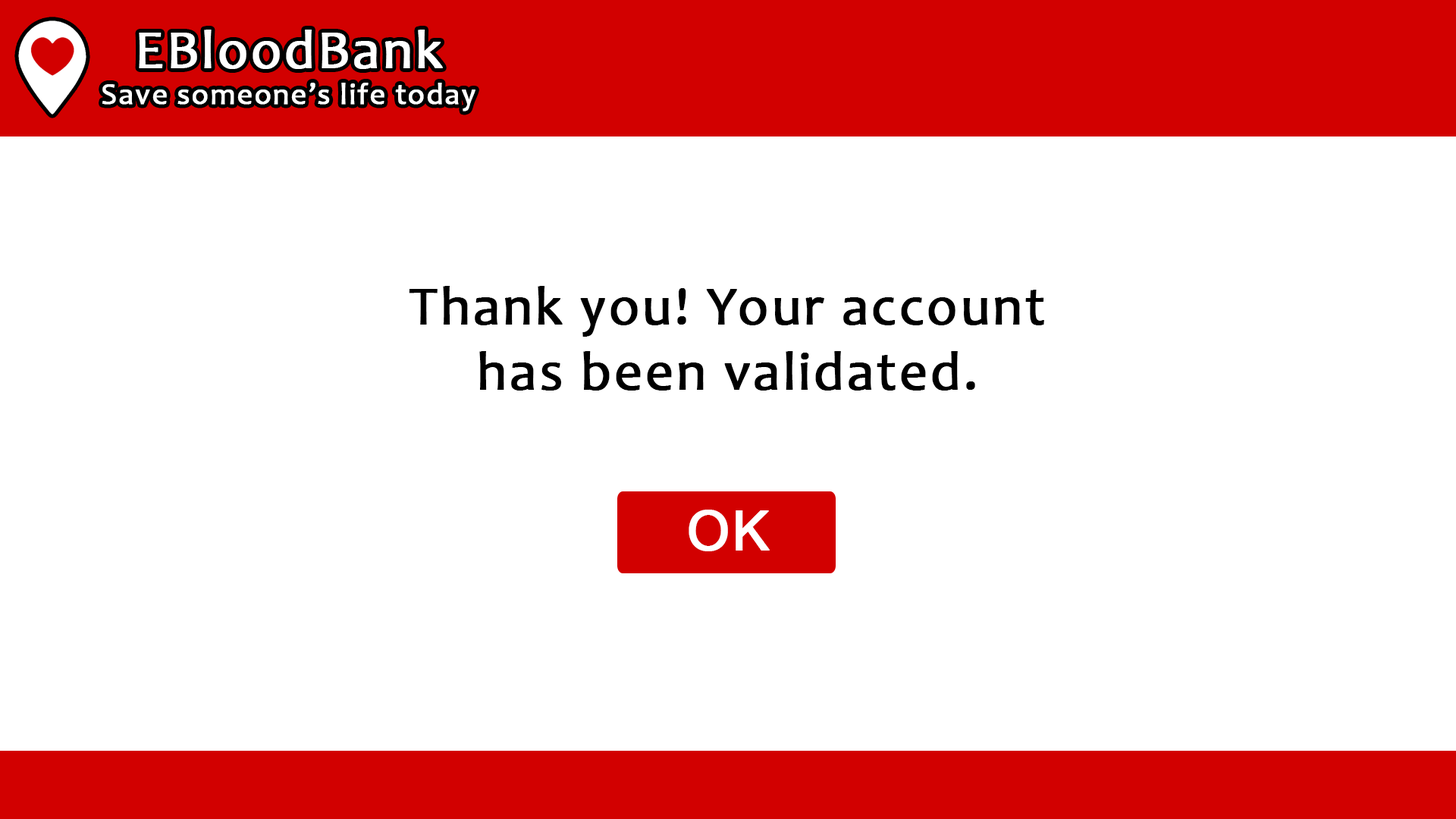
<style>
.page{position:relative;width:1456px;height:819px;background:#ffffff}
.page>*{position:absolute;margin:0}
.t1{font:30.3px "Candara";letter-spacing:0.03em;color:#ffffff;font-weight:bold}
.t2{font:54.6px "Candara";letter-spacing:0.03em;color:#ffffff;font-weight:bold}
.t3{font:54.6px "Candara";letter-spacing:0.03em;color:#000000;font-weight:bold}
.t4{font:54.6px "ArialMT";letter-spacing:0.03em;color:#ffffff;font-weight:bold}
</style>
<div class="page">
<p class="t1" style="left:102px;top:30px;width:373px;height:81px;text-align:center"><span class="t2">EBloodBank<br></span>Save someone’s life today</p>
<p class="t3" style="left:409px;top:286px;width:635px;height:105px;text-align:center">Thank you! Your account<br>has been validated.</p>
<p class="t4" style="left:689px;top:510px;width:81px;height:41px">OK</p>
</div>
